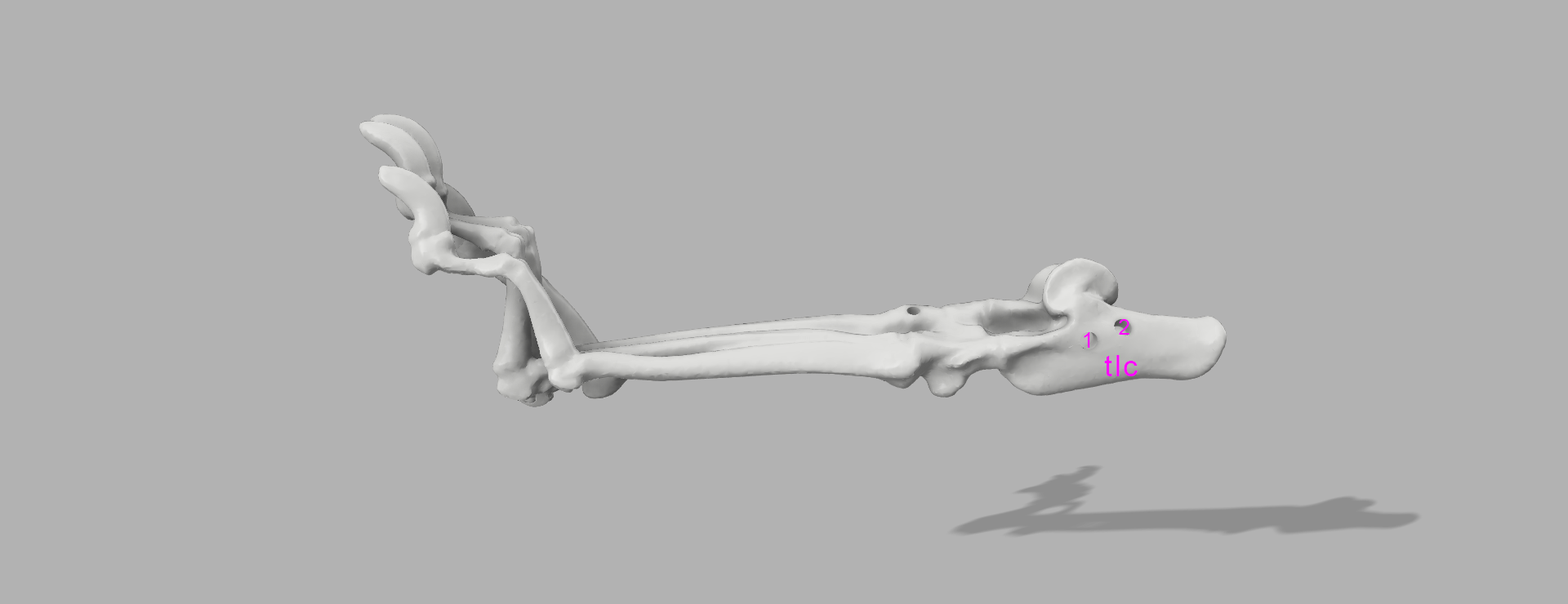
<style>
.page{position:relative;width:1568px;height:604px;background:#b2b2b2}
.page>*{position:absolute;margin:0}
.t1{font:21.2px "ArialMT";letter-spacing:0.06em;color:#ff00ff}
.t2{font:29.4px "ArialMT";letter-spacing:0.06em;color:#ff00ff}
</style>
<div class="page">
<p class="t1" style="left:1119px;top:319px;width:10px;height:16px">2</p>
<p class="t1" style="left:1084px;top:332px;width:6px;height:16px">1</p>
<p class="t2" style="left:1104px;top:355px;width:34px;height:21px">tlc</p>
</div>
